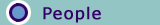
<style>
.page{position:relative;width:160px;height:25px;background:#94c5c5}
.page>*{position:absolute;margin:0}
.t1{font:16px "Verdana";letter-spacing:0.055em;color:#330066;font-weight:bold}
</style>
<div class="page">
<p class="t1" style="left:43px;top:6px;width:58px;height:17px">People</p>
</div>
